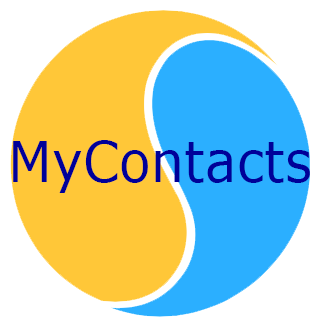
<style>
.page{position:relative;width:320px;height:328px;background:#ffffff}
.page>*{position:absolute;margin:0}
.t1{font:55.5px "Verdana";color:#000099;scale:0.94 1}
</style>
<div class="page">
<p class="t1" style="left:13px;top:140px;width:297px;height:53px">MyContacts</p>
</div>
